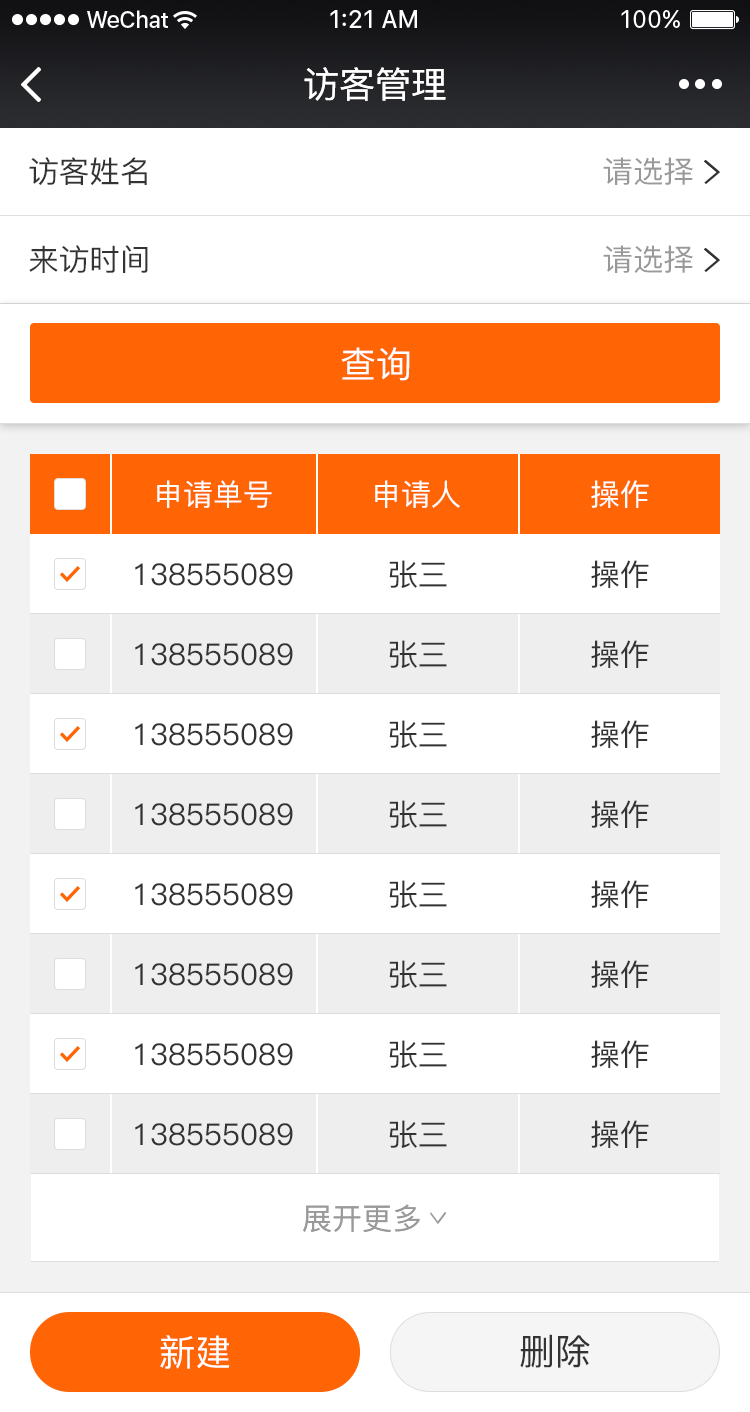
<style>
.page{position:relative;width:750px;height:1412px;background:#ffffff}
.page>*{position:absolute;margin:0}
.t1{font:36px "PingFang-SC-Medium";color:#ffffff}
.t2{font:30px "PingFang-SC-Medium";color:#333333}
.t3{font:30px "PingFang-SC-Medium";color:#999999}
.t4{font:30px "PingFang-SC-Medium";color:#ffffff}
.t5{font:36px "PingFang-SC-Medium";color:#333333}
</style>
<div class="page">
<p class="t1" style="left:304px;top:67px;width:142px;height:34px">访客管理</p>
<p class="t2" style="left:29px;top:157px;width:118px;height:28px">访客姓名</p>
<p class="t3" style="left:603px;top:157px;width:90px;height:28px">请选择</p>
<p class="t2" style="left:29px;top:245px;width:119px;height:28px">来访时间</p>
<p class="t3" style="left:603px;top:245px;width:90px;height:28px">请选择</p>
<p class="t1" style="left:341px;top:347px;width:69px;height:34px">查询</p>
<p class="t4" style="left:157px;top:480px;width:115px;height:28px">申请单号</p>
<p class="t4" style="left:375px;top:480px;width:85px;height:28px">申请人</p>
<p class="t4" style="left:591px;top:480px;width:58px;height:28px">操作</p>
<p class="t2" style="left:135px;top:563px;width:158px;height:23px">138555089</p>
<p class="t2" style="left:389px;top:560px;width:58px;height:28px">张三</p>
<p class="t2" style="left:591px;top:560px;width:58px;height:28px">操作</p>
<p class="t2" style="left:389px;top:640px;width:58px;height:28px">张三</p>
<p class="t2" style="left:591px;top:640px;width:58px;height:28px">操作</p>
<p class="t2" style="left:135px;top:643px;width:158px;height:23px">138555089</p>
<p class="t2" style="left:135px;top:723px;width:158px;height:23px">138555089</p>
<p class="t2" style="left:389px;top:720px;width:58px;height:28px">张三</p>
<p class="t2" style="left:591px;top:720px;width:58px;height:28px">操作</p>
<p class="t2" style="left:135px;top:803px;width:158px;height:23px">138555089</p>
<p class="t2" style="left:389px;top:800px;width:58px;height:28px">张三</p>
<p class="t2" style="left:591px;top:800px;width:58px;height:28px">操作</p>
<p class="t2" style="left:389px;top:880px;width:58px;height:28px">张三</p>
<p class="t2" style="left:591px;top:880px;width:58px;height:28px">操作</p>
<p class="t2" style="left:135px;top:883px;width:158px;height:23px">138555089</p>
<p class="t2" style="left:135px;top:963px;width:158px;height:23px">138555089</p>
<p class="t2" style="left:389px;top:960px;width:58px;height:28px">张三</p>
<p class="t2" style="left:591px;top:960px;width:58px;height:28px">操作</p>
<p class="t2" style="left:135px;top:1043px;width:158px;height:23px">138555089</p>
<p class="t2" style="left:389px;top:1040px;width:58px;height:28px">张三</p>
<p class="t2" style="left:591px;top:1040px;width:58px;height:28px">操作</p>
<p class="t2" style="left:389px;top:1120px;width:58px;height:28px">张三</p>
<p class="t2" style="left:591px;top:1120px;width:58px;height:28px">操作</p>
<p class="t2" style="left:135px;top:1123px;width:158px;height:23px">138555089</p>
<p class="t3" style="left:303px;top:1204px;width:117px;height:29px">展开更多</p>
<p class="t1" style="left:160px;top:1335px;width:70px;height:34px">新建</p>
<p class="t5" style="left:520px;top:1334px;width:70px;height:34px">删除</p>
</div>
